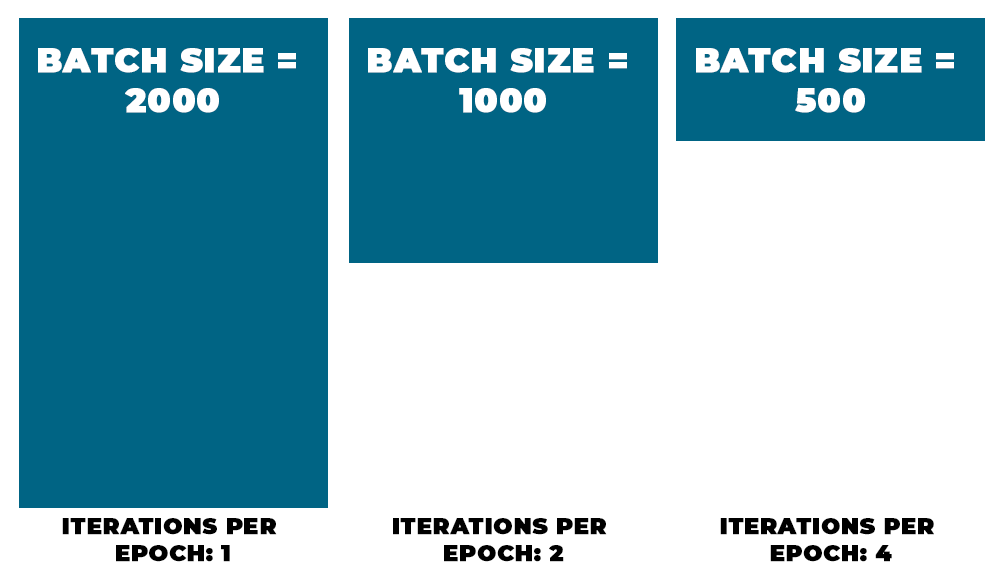
<style>
.page{position:relative;width:1007px;height:585px;background:#ffffff}
.page>*{position:absolute;margin:0}
.t1{font:33.3px "Montserrat-Black";letter-spacing:0.02em;color:#ffffff;text-transform:uppercase;font-weight:bold}
.t2{font:22.4px "Montserrat-Black";letter-spacing:0.02em;color:#000000;text-transform:uppercase;font-weight:bold}
</style>
<div class="page">
<p class="t1" style="left:38px;top:48px;width:258px;height:65px;text-align:center">BATCH SIZE = <br>2000</p>
<p class="t1" style="left:368px;top:48px;width:259px;height:65px;text-align:center">BATCH SIZE = <br>1000</p>
<p class="t1" style="left:696px;top:48px;width:258px;height:65px;text-align:center">BATCH SIZE = <br>500</p>
<p class="t2" style="left:62px;top:518px;width:215px;height:44px;text-align:center">Iterations per <br>EPOCH: 1</p>
<p class="t2" style="left:393px;top:518px;width:214px;height:44px;text-align:center">Iterations per <br>EPOCH: 2</p>
<p class="t2" style="left:720px;top:518px;width:214px;height:44px;text-align:center">Iterations per <br>EPOCH: 4</p>
</div>
